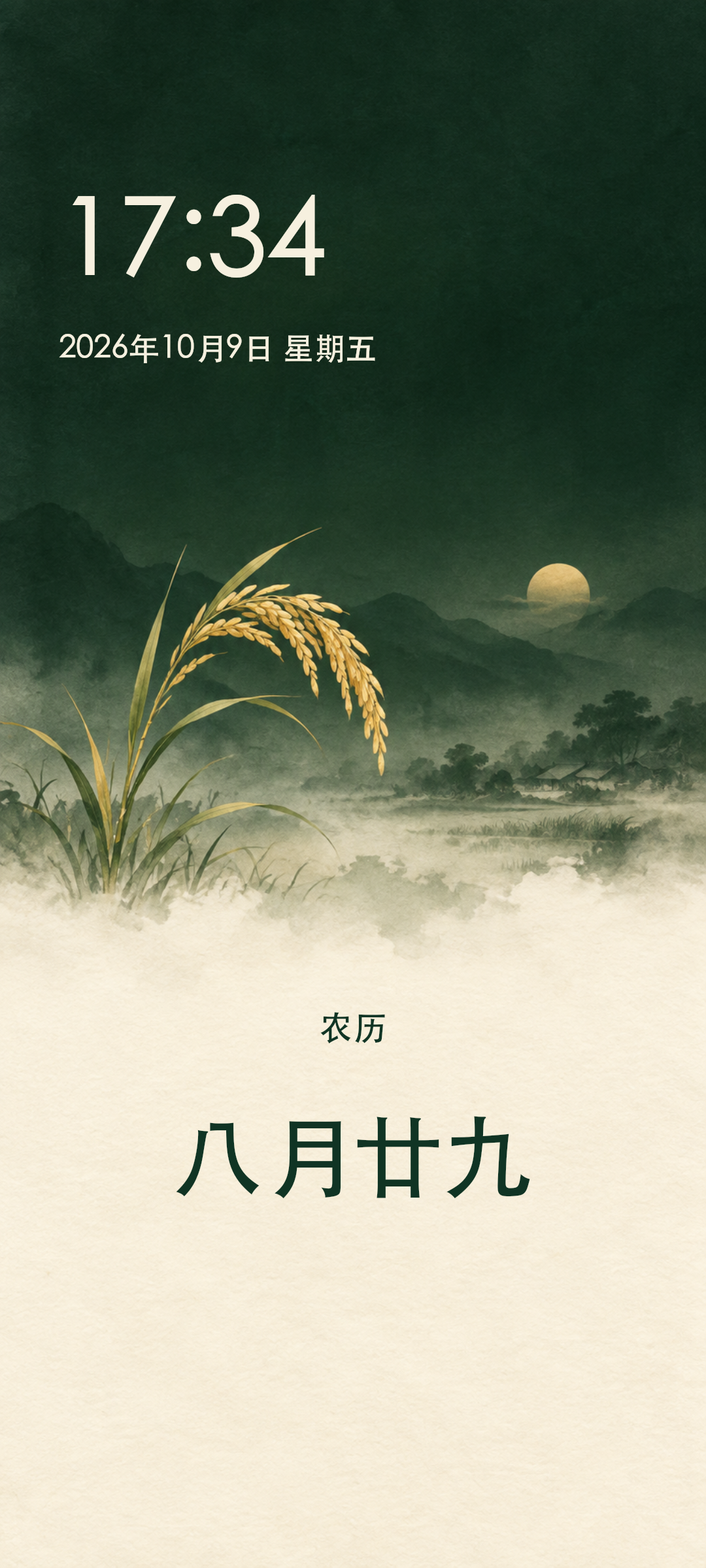
<style>
.page{position:relative;width:706px;height:1568px}
.page>*{position:absolute;margin:0}
.t1{font:107.1px "STHeitiTC-Medium";color:#f6f0df}
.t2{font:31.4px "STHeitiTC-Medium";color:#f6f0df}
.t3{font:34px "STHeitiTC-Medium";color:#103424}
.t4{font:90.2px "STHeitiTC-Medium";color:#103424}
</style>
<div class="page">
<p class="t1" style="left:73px;top:195px;width:251px;height:83px">17:34</p>
<p class="t2" style="left:59px;top:333px;width:316px;height:30px">2026年10月9日 星期五</p>
<p class="t3" style="left:320px;top:1012px;width:65px;height:32px">农历</p>
<p class="t4" style="left:176px;top:1116px;width:354px;height:83px">八月廿九</p>
</div>
